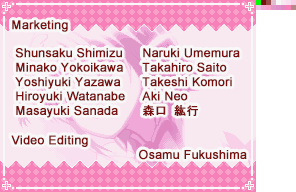
<style>
.page{position:relative;width:296px;height:192px}
.page>*{position:absolute;margin:0}
.t1{font:12px "ArialMT";letter-spacing:0.015em;color:#781010;font-weight:bold}
.t2{font:12px "MS-Gothic";letter-spacing:0.015em;color:#781010;font-weight:bold}
</style>
<div class="page">
<p class="t1" style="left:11px;top:20px;width:236px;height:140px">Marketing<br><br><br><br><br><br><br><br>Video Editing<br>   Osamu Fukushima</p>
<p class="t1" style="left:15px;top:48px;width:110px;height:70px">Shunsaku Shimizu<br>Minako Yokoikawa<br>Yoshiyuki Yazawa<br>Hiroyuki Watanabe<br>Masayuki Sanada</p>
<p class="t1" style="left:142px;top:48px;width:98px;height:68px">Naruki Umemura<br>Takahiro Saito<br>Takeshi Komori<br>Aki Neo<br><span class="t2">森口 紘行</span></p>
</div>
